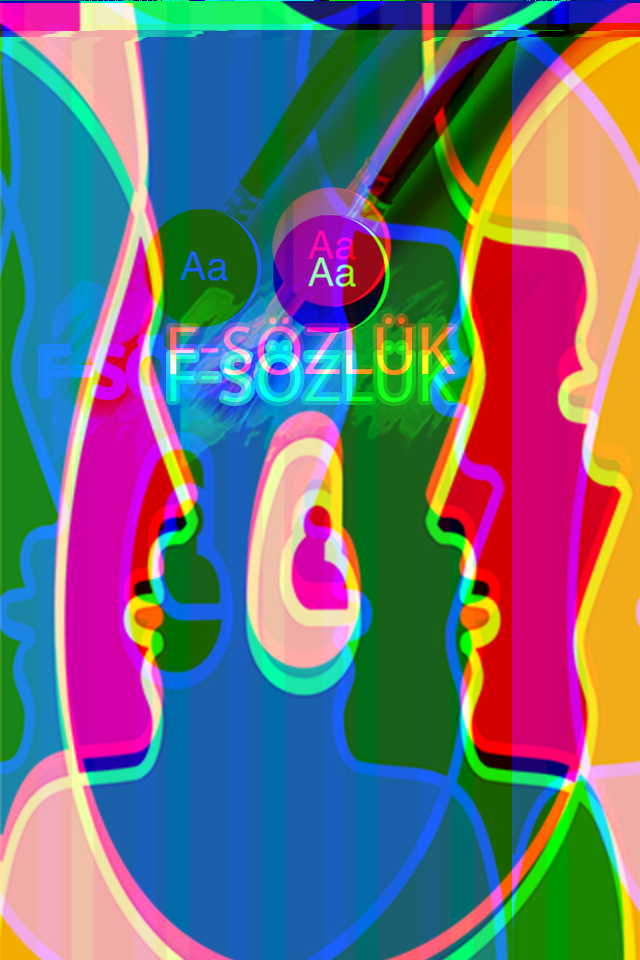
<style>
.page{position:relative;width:640px;height:960px}
.page>*{position:absolute;margin:0}
.t1{font:69.5px "MyriadPro-Regular";text-transform:uppercase}
</style>
<div class="page">
<p class="t1" style="left:170px;top:314px;width:286px;height:58px">F-Sözlük</p>
</div>
